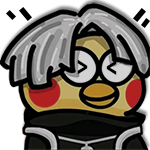
<style>
.page{position:relative;width:150px;height:150px}
.page>*{position:absolute;margin:0}
.t1{font:24px "SourceCodePro-Black";letter-spacing:0.1em;color:#000000;text-transform:uppercase}
</style>
<div class="page">
<p class="t1" style="left:77px;top:59px;width:11px;height:16px">&gt;</p>
<p class="t1" style="left:106px;top:60px;width:11px;height:15px;rotate:180deg">&gt;</p>
</div>
